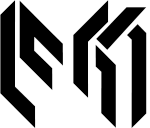
<style>
.page{position:relative;width:150px;height:128px;background:#ffffff}
.page>*{position:absolute;margin:0}
.t1{font:150px "BambuRuncingLite-Regular";color:#000000}
</style>
<div class="page">
<p class="t1" style="left:0px;top:0px;width:147px;height:129px">FM</p>
</div>
